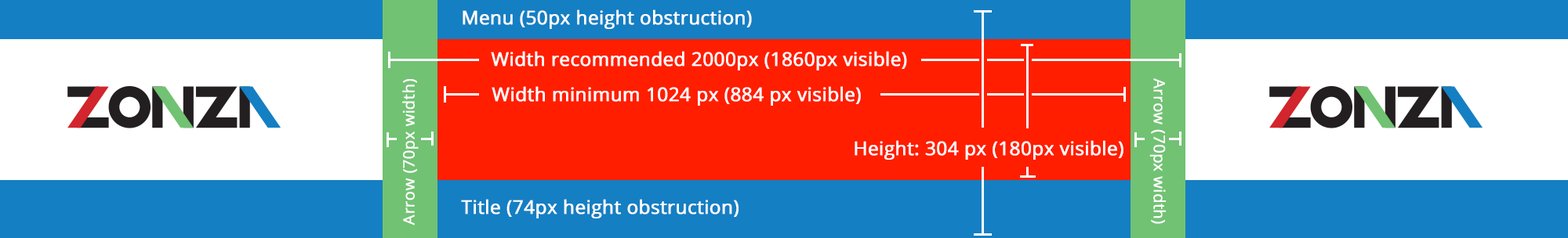
<style>
.page{position:relative;width:1568px;height:238px;background:#147fc3}
.page>*{position:absolute;margin:0}
.t1{font:9.4px/22px "OpenSans";color:#ffffff;font-weight:bold}
.t2{font:15.7px "OpenSans";color:#ffffff;font-weight:bold}
</style>
<div class="page">
<p class="t1" style="left:463px;top:9px;width:289px;height:20px">Menu (50px height obstruction)</p>
<p class="t1" style="left:491px;top:51px;width:416px;height:20px">Width recommended 2000px (1860px visible)</p>
<p class="t2" style="left:402px;top:79px;width:17px;height:147px;rotate:-90deg">Arrow (70px width)</p>
<p class="t1" style="left:492px;top:86px;width:369px;height:20px">Width minimum 1024 px (884 px visible)</p>
<p class="t2" style="left:1149px;top:78px;width:17px;height:146px;rotate:90deg">Arrow (70px width)</p>
<p class="t1" style="left:855px;top:140px;width:268px;height:20px">Height: 304 px (180px visible)</p>
<p class="t1" style="left:461px;top:199px;width:278px;height:20px">Title (74px height obstruction)</p>
</div>
